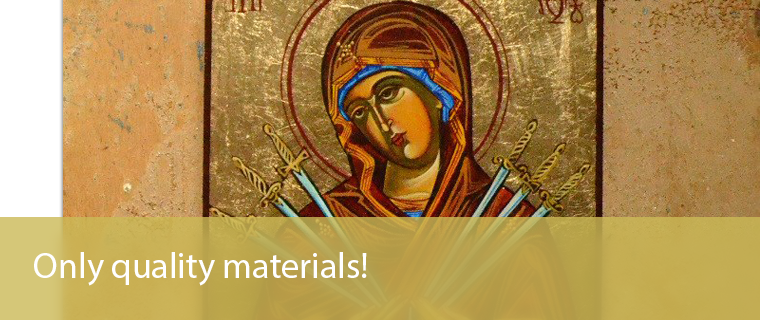
<style>
.page{position:relative;width:760px;height:320px}
.page>*{position:absolute;margin:0}
.t1{font:36px "MyriadPro-Regular";color:#ffffff}
</style>
<div class="page">
<p class="t1" style="left:34px;top:252px;width:333px;height:34px">Only quality materials!</p>
</div>
